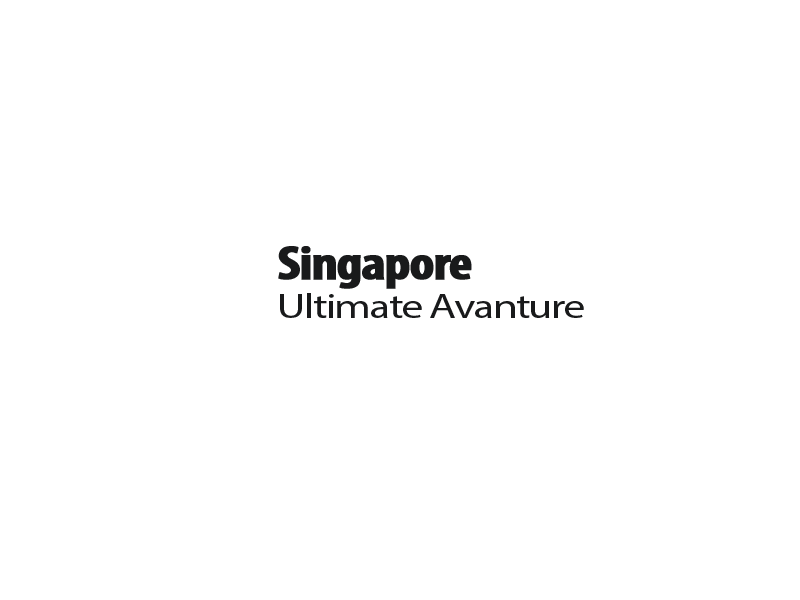
<style>
.page{position:relative;width:800px;height:600px;background:#ffffff}
.page>*{position:absolute;margin:0}
.t1{font:47.8px "MyriadPro-BoldCond";letter-spacing:-0.04em;color:#191a1b;font-weight:bold;scale:1.19 1}
.t2{font:35px "MyriadPro-Regular";letter-spacing:-0.04em;color:#191a1b;scale:1.27 1}
</style>
<div class="page">
<p class="t1" style="left:278px;top:246px;width:194px;height:43px">Singapore</p>
<p class="t2" style="left:280px;top:293px;width:304px;height:25px">Ultimate Avanture</p>
</div>
